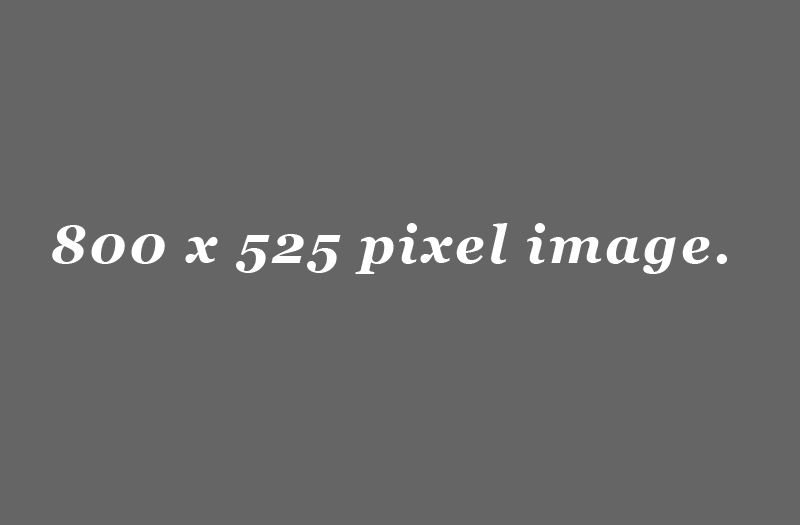
<style>
.page{position:relative;width:800px;height:525px;background:#656565}
.page>*{position:absolute;margin:0}
.t1{font:53px "Georgia-BoldItalic";letter-spacing:0.06em;color:#ffffff}
</style>
<div class="page">
<p class="t1" style="left:52px;top:223px;width:675px;height:51px">800 x 525 pixel image.</p>
</div>
